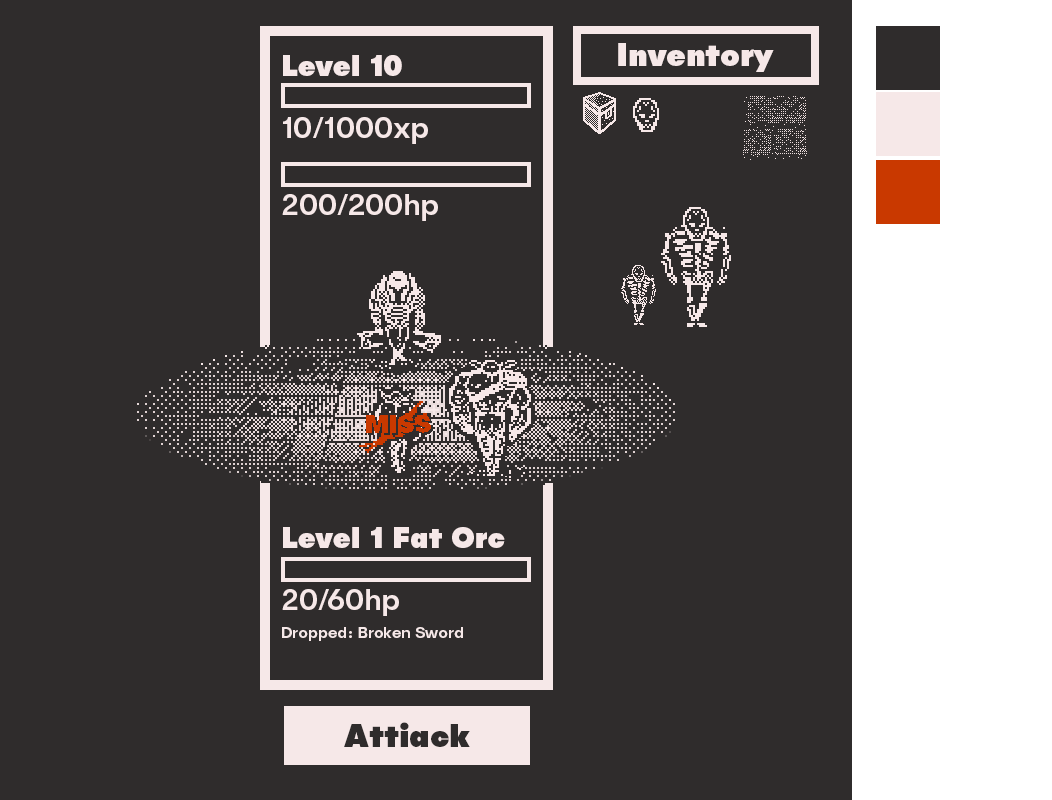
<style>
.page{position:relative;width:1052px;height:800px;background:#2f2c2c}
.page>*{position:absolute;margin:0}
.t1{font:32px "PublicaSans-Black";color:#f6e8e8}
.t2{font:29.3px "PublicaSans-Black";color:#f6e8e8}
.t3{font:29.3px "PublicaSans-Medium";color:#f6e8e8}
.t4{font:16px "PublicaSans-Medium";color:#f6e8e8}
.t5{font:32px "PublicaSans-Black";color:#2f2c2c}
</style>
<div class="page">
<p class="t1" style="left:618px;top:43px;width:156px;height:29px">Inventory</p>
<p class="t2" style="left:283px;top:55px;width:119px;height:21px">Level 10</p>
<p class="t3" style="left:283px;top:117px;width:145px;height:27px">10/1000xp</p>
<p class="t3" style="left:282px;top:194px;width:156px;height:27px">200/200hp</p>
<p class="t2" style="left:283px;top:527px;width:222px;height:21px">Level 1 Fat Orc</p>
<p class="t3" style="left:282px;top:589px;width:117px;height:27px">20/60hp</p>
<p class="t4" style="left:282px;top:627px;width:181px;height:14px">Dropped: Broken Sword</p>
<p class="t5" style="left:344px;top:722px;width:126px;height:25px">Attiack</p>
</div>
